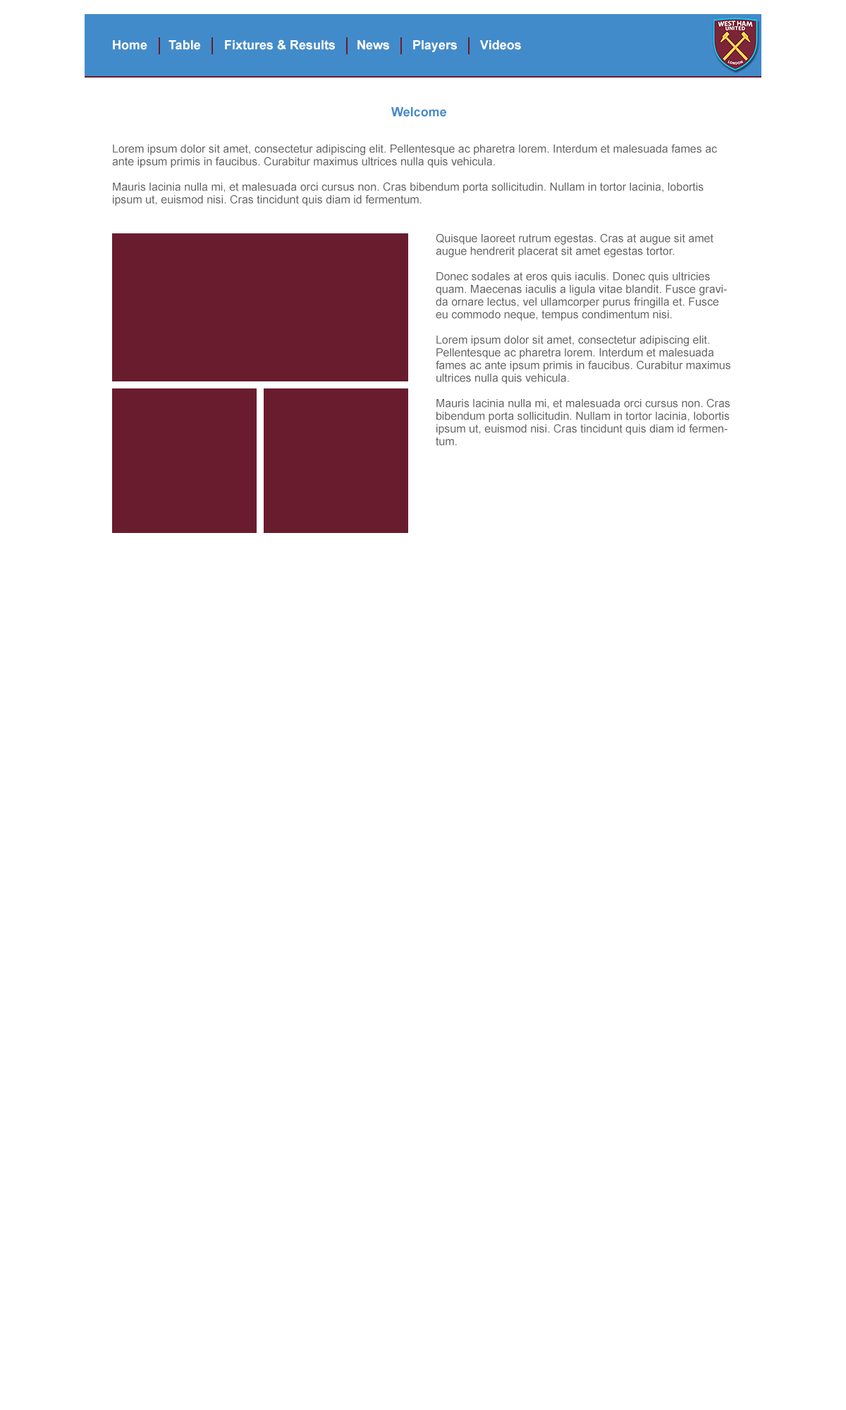
<style>
.page{position:relative;width:846px;height:1410px;background:#ffffff}
.page>*{position:absolute;margin:0}
.t1{font:12.7px "Arial-BoldMT";color:#ffffff}
.t2{font:12.7px "Arial-BoldMT";color:#428bca}
.t3{font:11.3px/12.7px "ArialMT";color:#666666}
</style>
<div class="page">
<p class="t1" style="left:113px;top:40px;width:34px;height:10px">Home</p>
<p class="t1" style="left:168px;top:40px;width:32px;height:10px">Table</p>
<p class="t1" style="left:225px;top:39px;width:110px;height:11px">Fixtures &amp; Results</p>
<p class="t1" style="left:357px;top:40px;width:32px;height:10px">News</p>
<p class="t1" style="left:413px;top:40px;width:44px;height:12px">Players</p>
<p class="t1" style="left:480px;top:40px;width:41px;height:10px">Videos</p>
<p class="t2" style="left:391px;top:107px;width:55px;height:10px">Welcome</p>
<p class="t3" style="left:112px;top:144px;width:605px;height:62px">Lorem ipsum dolor sit amet, consectetur adipiscing elit. Pellentesque ac pharetra lorem. Interdum et malesuada fames ac ante ipsum primis in faucibus. Curabitur maximus ultrices nulla quis vehicula. <br><br>Mauris lacinia nulla mi, et malesuada orci cursus non. Cras bibendum porta sollicitudin. Nullam in tortor lacinia, lobortis ipsum ut, euismod nisi. Cras tincidunt quis diam id fermentum.</p>
<p class="t3" style="left:436px;top:233px;width:294px;height:212px">Quisque laoreet rutrum egestas. Cras at augue sit amet augue hendrerit placerat sit amet egestas tortor.<br><br>Donec sodales at eros quis iaculis. Donec quis ultricies quam. Maecenas iaculis a ligula vitae blandit. Fusce gravida ornare lectus, vel ullamcorper purus fringilla et. Fusce eu commodo neque, tempus condimentum nisi.<br><br>Lorem ipsum dolor sit amet, consectetur adipiscing elit. Pellentesque ac pharetra lorem. Interdum et malesuada fames ac ante ipsum primis in faucibus. Curabitur maximus ultrices nulla quis vehicula. <br><br>Mauris lacinia nulla mi, et malesuada orci cursus non. Cras bibendum porta sollicitudin. Nullam in tortor lacinia, lobortis ipsum ut, euismod nisi. Cras tincidunt quis diam id fermentum.</p>
</div>
